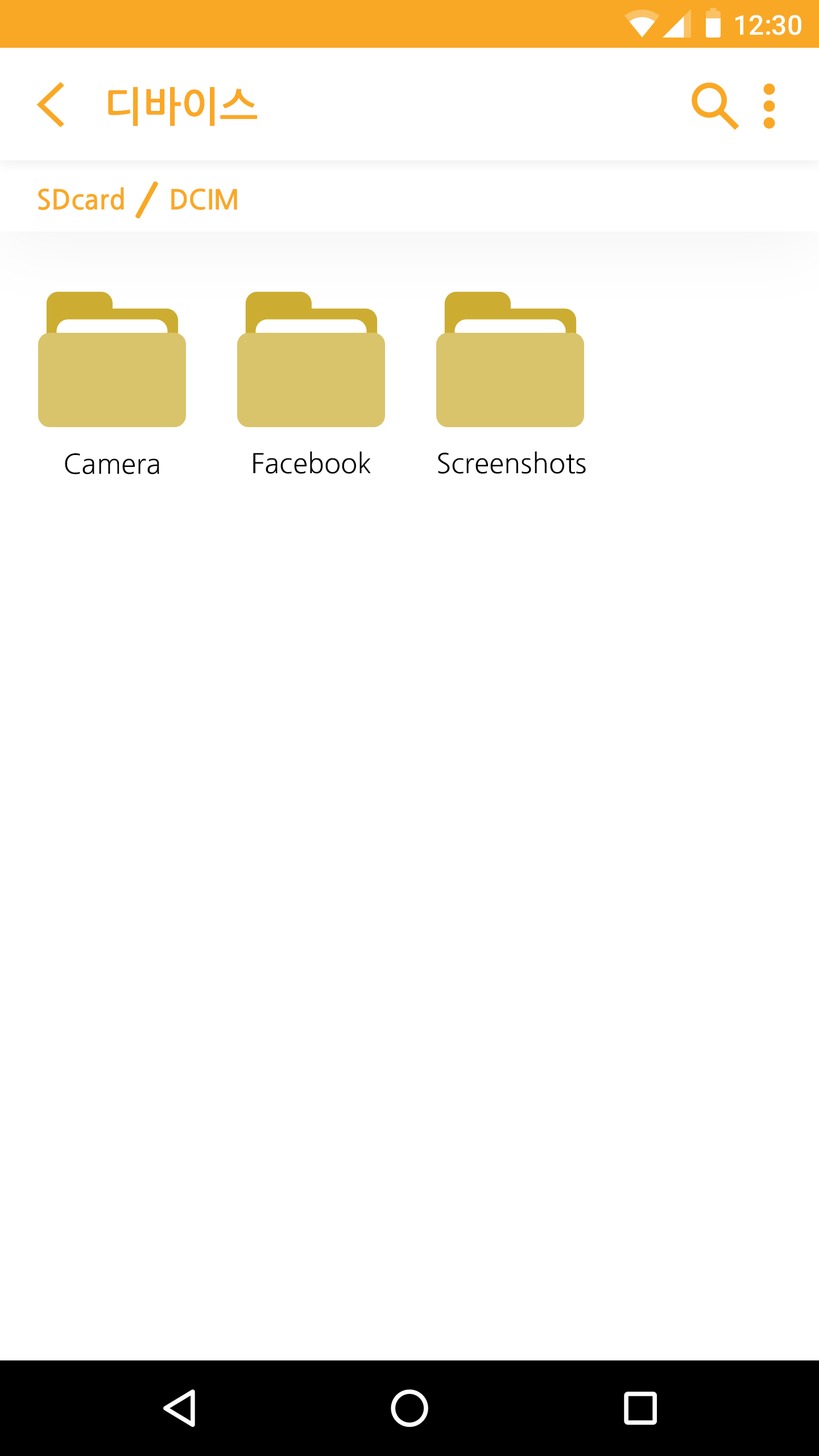
<style>
.page{position:relative;width:819px;height:1456px;background:#ffffff}
.page>*{position:absolute;margin:0}
.t1{font:27.3px "Roboto-Medium";color:#ffffff}
.t2{font:40.9px "NanumGothicBold";color:#f9a825}
.t3{font:27.3px "NanumGothicBold";color:#f9a825}
.t4{font:27.3px "NanumGothic";color:#000000}
.t5{font:27.4px "NanumGothic";color:#000000}
</style>
<div class="page">
<p class="t1" style="left:735px;top:15px;width:66px;height:20px">12:30</p>
<p class="t2" style="left:108px;top:87px;width:150px;height:39px">디바이스</p>
<p class="t3" style="left:38px;top:187px;width:86px;height:23px">SDcard</p>
<p class="t3" style="left:171px;top:188px;width:66px;height:22px">DCIM</p>
<p class="t4" style="left:65px;top:453px;width:94px;height:21px">Camera</p>
<p class="t5" style="left:253px;top:451px;width:118px;height:23px">Facebook</p>
<p class="t5" style="left:438px;top:451px;width:148px;height:23px">Screenshots</p>
</div>
